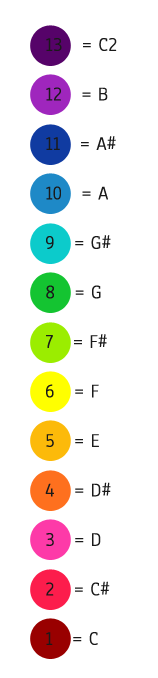
<style>
.page{position:relative;width:158px;height:678px;background:#ffffff}
.page>*{position:absolute;margin:0}
.t1{font:20px/49.5px "Anaheim-Regular";letter-spacing:-0.005em;color:#1a1a1a}
</style>
<div class="page">
<p class="t1" style="left:45px;top:38px;width:72px;height:607px">13   = C2<br>12   = B<br>11   = A#<br>10   = A<br>9   = G#<br>8   = G<br>7   = F#<br>6   = F<br>5   = E<br>4   = D#<br>3   = D<br>2   = C#<br>1   = C</p>
</div>
